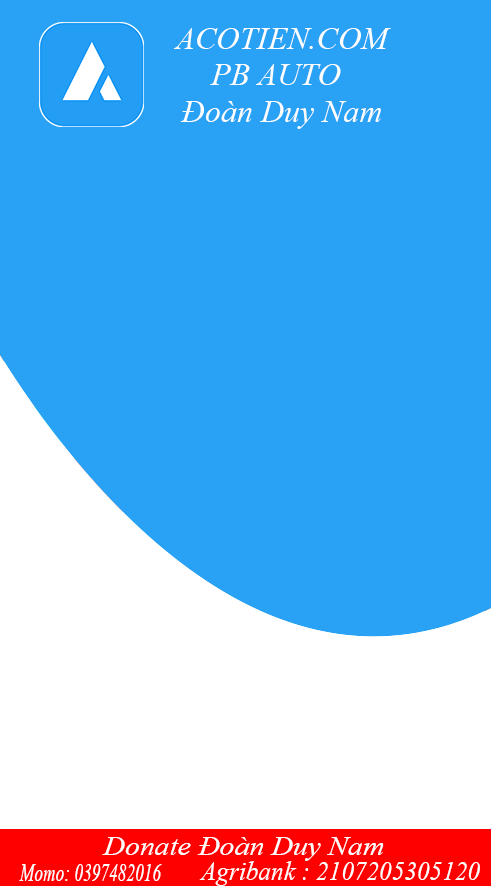
<style>
.page{position:relative;width:491px;height:886px;background:#29a2f5}
.page>*{position:absolute;margin:0}
.t1{font:32px "TimesNewRomanPS-ItalicMT";color:#ffffff}
.t2{font:26.6px "TimesNewRomanPS-ItalicMT";color:#ffffff;scale:1.11 1}
.t3{font:24.8px "TimesNewRomanPS-ItalicMT";color:#ffffff;scale:0.7 1}
.t4{font:26.6px "TimesNewRomanPS-ItalicMT";color:#ffffff;scale:0.95 1}
</style>
<div class="page">
<p class="t1" style="left:174px;top:28px;width:217px;height:21px">ACOTIEN.COM</p>
<p class="t1" style="left:210px;top:64px;width:131px;height:21px">PB AUTO</p>
<p class="t1" style="left:180px;top:101px;width:201px;height:28px">Đoàn Duy Nam</p>
<p class="t2" style="left:102px;top:837px;width:282px;height:24px">Donate Đoàn Duy Nam</p>
<p class="t3" style="left:19px;top:864px;width:143px;height:17px">Momo: 0397482016</p>
<p class="t4" style="left:199px;top:861px;width:281px;height:25px">Agribank : 2107205305120</p>
</div>
